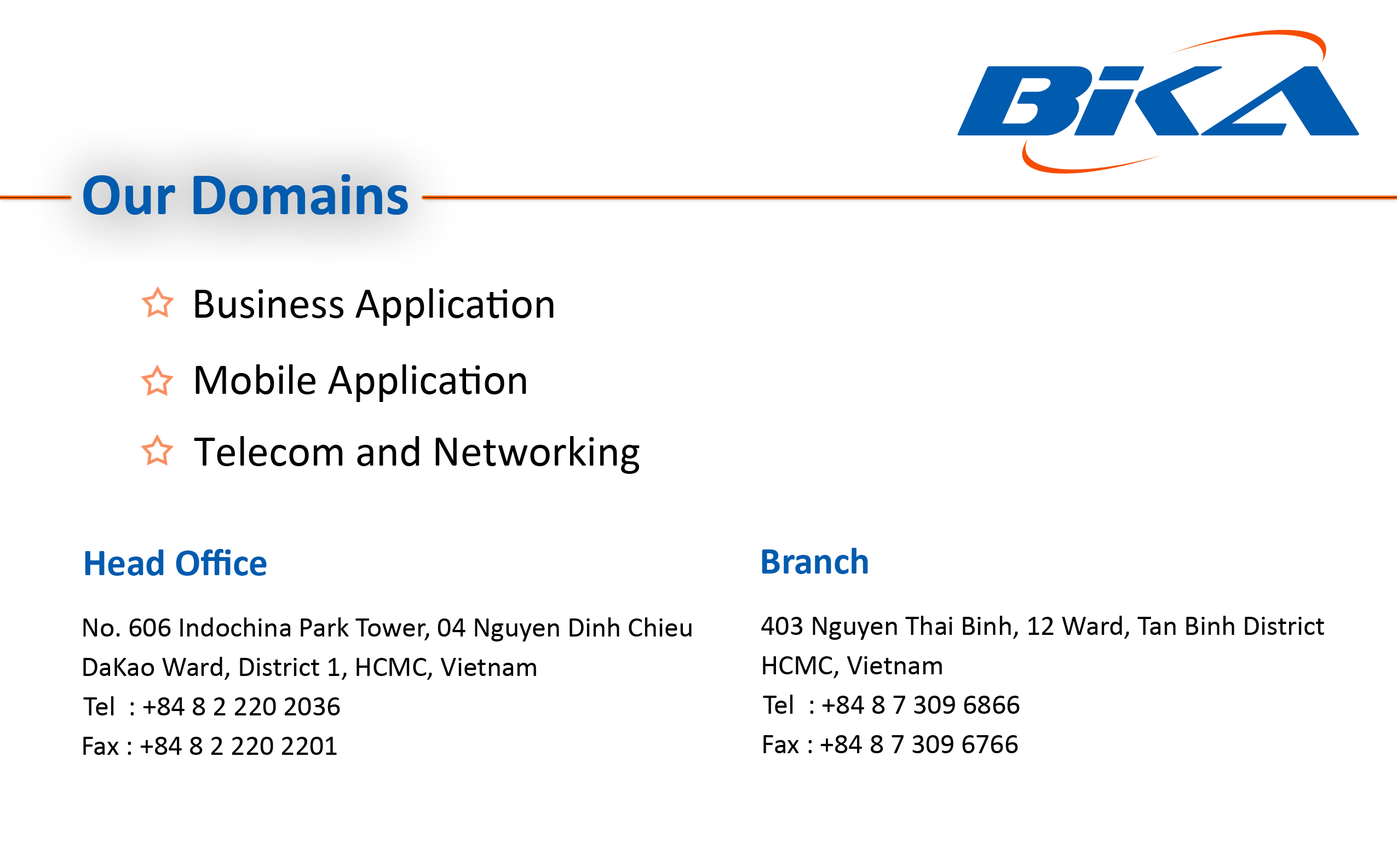
<style>
.page{position:relative;width:1397px;height:854px;background:#ffffff}
.page>*{position:absolute;margin:0}
.t1{font:60.2px "Calibri-Bold";color:#015bae}
.t2{font:43.8px "Calibri";color:#000101}
.t3{font:43.8px "Calibri";color:#000000}
.t4{font:38.3px "Calibri-Bold";color:#015bae}
.t5{font:28.5px "Calibri";color:#000000}
</style>
<div class="page">
<p class="t1" style="left:83px;top:174px;width:325px;height:41px">Our Domains</p>
<p class="t2" style="left:195px;top:288px;width:359px;height:38px">Business Application</p>
<p class="t3" style="left:195px;top:364px;width:331px;height:38px">Mobile Application</p>
<p class="t3" style="left:194px;top:436px;width:446px;height:38px">Telecom and Networking</p>
<p class="t4" style="left:85px;top:549px;width:182px;height:26px">Head Office</p>
<p class="t4" style="left:762px;top:548px;width:106px;height:26px">Branch</p>
<p class="t5" style="left:83px;top:617px;width:609px;height:24px">No. 606 Indochina Park Tower, 04 Nguyen Dinh Chieu</p>
<p class="t5" style="left:761px;top:615px;width:563px;height:25px">403 Nguyen Thai Binh, 12 Ward, Tan Binh District</p>
<p class="t5" style="left:83px;top:657px;width:453px;height:23px">DaKao Ward, District 1, HCMC, Vietnam</p>
<p class="t5" style="left:763px;top:656px;width:179px;height:22px">HCMC, Vietnam</p>
<p class="t5" style="left:83px;top:696px;width:257px;height:19px">Tel  : +84 8 2 220 2036</p>
<p class="t5" style="left:763px;top:694px;width:257px;height:19px">Tel  : +84 8 7 309 6866</p>
<p class="t5" style="left:83px;top:736px;width:254px;height:19px">Fax : +84 8 2 220 2201</p>
<p class="t5" style="left:763px;top:735px;width:255px;height:18px">Fax : +84 8 7 309 6766</p>
</div>
